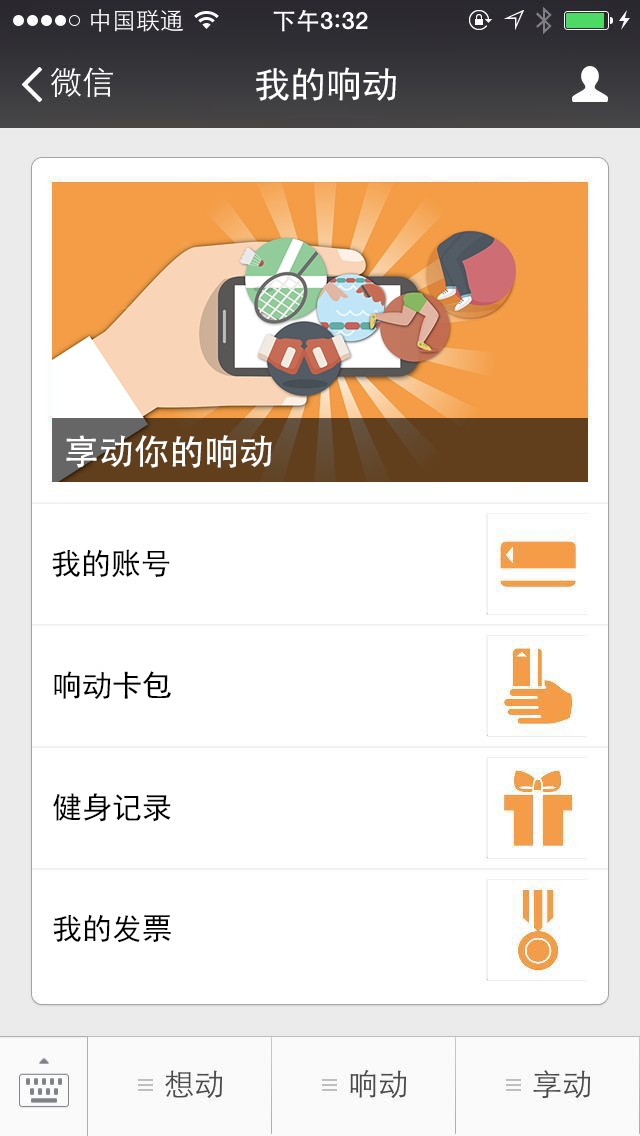
<style>
.page{position:relative;width:640px;height:1136px;background:#ffffff}
.page>*{position:absolute;margin:0}
.t1{font:36px "SimHei";color:#ffffff}
.t2{font:35.2px "AdobeHeitiStd-Regular";color:#ffffff}
.t3{font:30px "SimHei";color:#000000}
</style>
<div class="page">
<p class="t1" style="left:256px;top:67px;width:140px;height:34px">我的响动</p>
<p class="t2" style="left:66px;top:435px;width:206px;height:33px">享动你的响动</p>
<p class="t3" style="left:52px;top:549px;width:118px;height:29px">我的账号</p>
<p class="t3" style="left:54px;top:671px;width:117px;height:28px">响动卡包</p>
<p class="t3" style="left:53px;top:793px;width:118px;height:29px">健身记录</p>
<p class="t3" style="left:53px;top:914px;width:118px;height:29px">我的发票</p>
</div>
